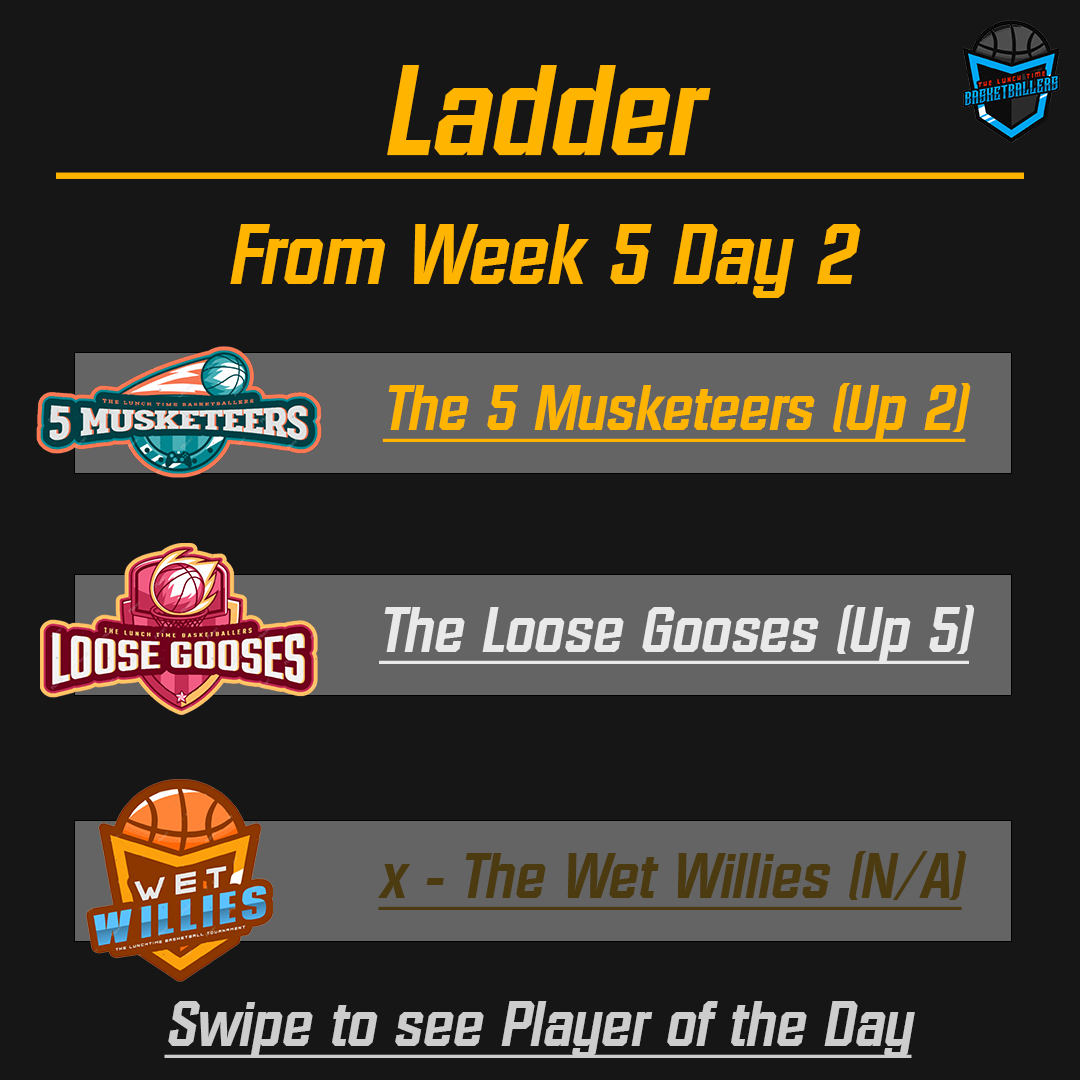
<style>
.page{position:relative;width:1080px;height:1080px;background:#161616}
.page>*{position:absolute;margin:0}
.t1{font:83.3px/129.2px "Diamante-Serial-BoldItalic";color:#ffb400}
.t2{font:125px/129.2px "Diamante-Serial-BoldItalic";color:#ffb400;text-decoration:underline}
.t3{font:62.5px "Diamante-Serial-BoldItalic";color:#ffb400;text-decoration:underline}
.t4{font:62.5px "Diamante-Serial-BoldItalic";color:#e9e9e9;text-decoration:underline}
.t5{font:62.5px "Diamante-Serial-BoldItalic";color:#4c3b11;text-decoration:underline}
.t6{font:62.5px "Diamante-Serial-BoldItalic";color:#cdcdcd;text-decoration:underline}
</style>
<div class="page">
<p class="t1" style="left:56px;top:65px;width:968px;height:233px;text-align:center"><span class="t2">         Ladder         <br></span>From Week 5 Day 2</p>
<p class="t3" style="left:382px;top:383px;width:589px;height:59px">The 5 Musketeers (Up 2)</p>
<p class="t4" style="left:379px;top:605px;width:595px;height:59px">The Loose Gooses (Up 5)</p>
<p class="t5" style="left:378px;top:851px;width:589px;height:59px">x - The Wet Willies (N/A)</p>
<p class="t6" style="left:164px;top:1001px;width:751px;height:57px">Swipe to see Player of the Day</p>
</div>
